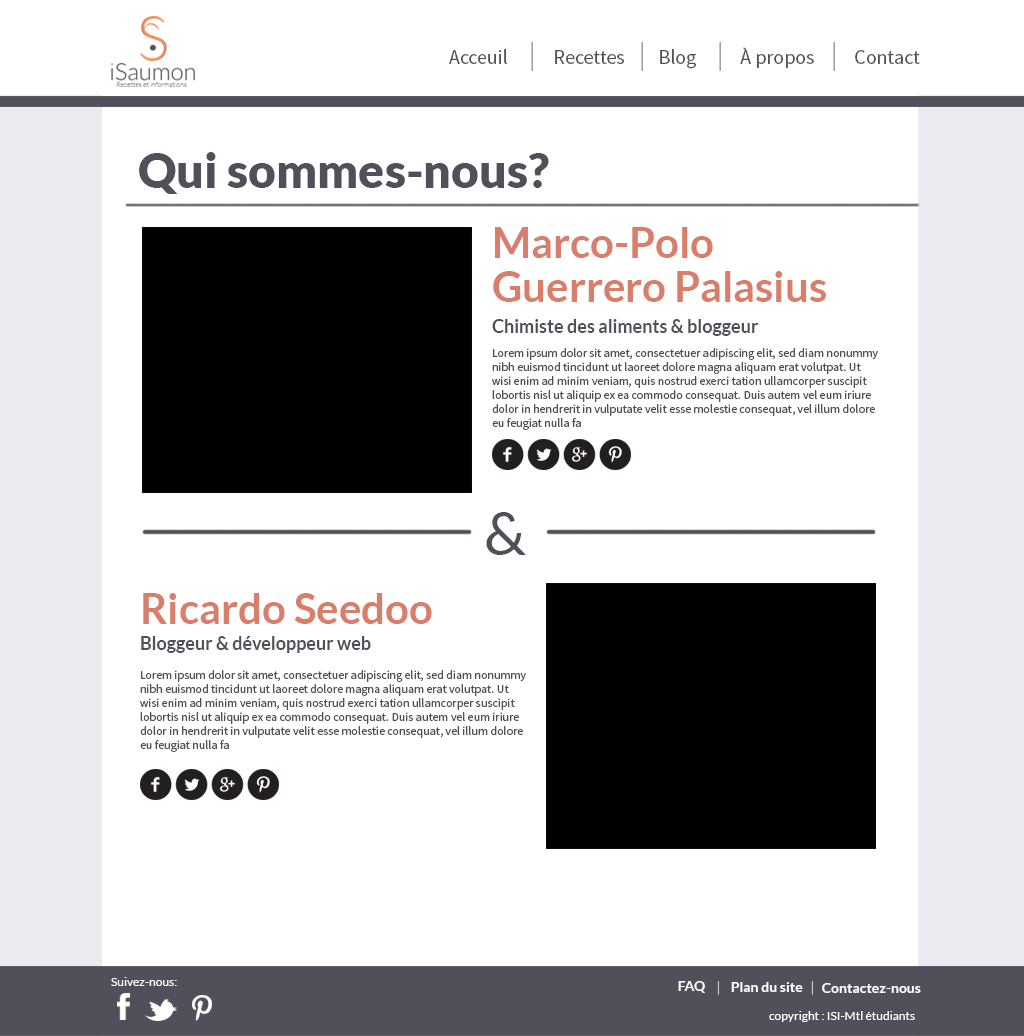
<style>
.page{position:relative;width:1024px;height:1036px;background:#ffffff}
.page>*{position:absolute;margin:0}
.t1{font:20.1px "SourceSansPro-Regular";color:#4f5059}
.t2{font:48px "Lato-Black";color:#4f5059}
.t3{font:42px/44px "Lato-Bold";color:#d97e6a}
.t4{font:18px "Lato-Bold";color:#4f5059}
.t5{font:12px/14px "SourceSansPro-Regular";color:#4f5059}
.t6{font:60px "Lato-Regular";color:#4f5059}
.t7{font:42px "Lato-Bold";color:#d97e6a}
.t8{font:12px "Lato-Regular";color:#ffffff}
.t9{font:14px "Lato-Bold";color:#ffffff}
</style>
<div class="page">
<p class="t1" style="left:449px;top:49px;width:58px;height:15px">Acceuil</p>
<p class="t1" style="left:555px;top:50px;width:69px;height:14px">Recettes</p>
<p class="t1" style="left:660px;top:49px;width:36px;height:20px">Blog</p>
<p class="t1" style="left:740px;top:47px;width:74px;height:21px">À propos</p>
<p class="t1" style="left:855px;top:50px;width:65px;height:14px">Contact</p>
<p class="t2" style="left:139px;top:152px;width:410px;height:42px">Qui sommes-nous?</p>
<p class="t3" style="left:493px;top:227px;width:333px;height:75px">Marco-Polo<br>Guerrero Palasius</p>
<p class="t4" style="left:492px;top:319px;width:266px;height:17px">Chimiste des aliments &amp; bloggeur</p>
<p class="t5" style="left:492px;top:348px;width:386px;height:82px">Lorem ipsum dolor sit amet, consectetuer adipiscing elit, sed diam nonummy nibh euismod tincidunt ut laoreet dolore magna aliquam erat volutpat. Ut wisi enim ad minim veniam, quis nostrud exerci tation ullamcorper suscipit lobortis nisl ut aliquip ex ea commodo consequat. Duis autem vel eum iriure dolor in hendrerit in vulputate velit esse molestie consequat, vel illum dolore eu feugiat nulla fa</p>
<p class="t6" style="left:486px;top:512px;width:40px;height:43px">&amp;</p>
<p class="t7" style="left:143px;top:593px;width:289px;height:31px">Ricardo Seedoo</p>
<p class="t4" style="left:141px;top:636px;width:230px;height:17px">Bloggeur &amp; développeur web</p>
<p class="t5" style="left:140px;top:670px;width:386px;height:82px">Lorem ipsum dolor sit amet, consectetuer adipiscing elit, sed diam nonummy nibh euismod tincidunt ut laoreet dolore magna aliquam erat volutpat. Ut wisi enim ad minim veniam, quis nostrud exerci tation ullamcorper suscipit lobortis nisl ut aliquip ex ea commodo consequat. Duis autem vel eum iriure dolor in hendrerit in vulputate velit esse molestie consequat, vel illum dolore eu feugiat nulla fa</p>
<p class="t8" style="left:111px;top:977px;width:66px;height:9px">Suivez-nous:</p>
<p class="t9" style="left:678px;top:981px;width:27px;height:12px">FAQ</p>
<p class="t9" style="left:731px;top:982px;width:72px;height:10px">Plan du site</p>
<p class="t9" style="left:822px;top:983px;width:99px;height:10px">Contactez-nous</p>
<p class="t8" style="left:769px;top:1011px;width:146px;height:11px">copyright : ISI-Mtl étudiants</p>
</div>
